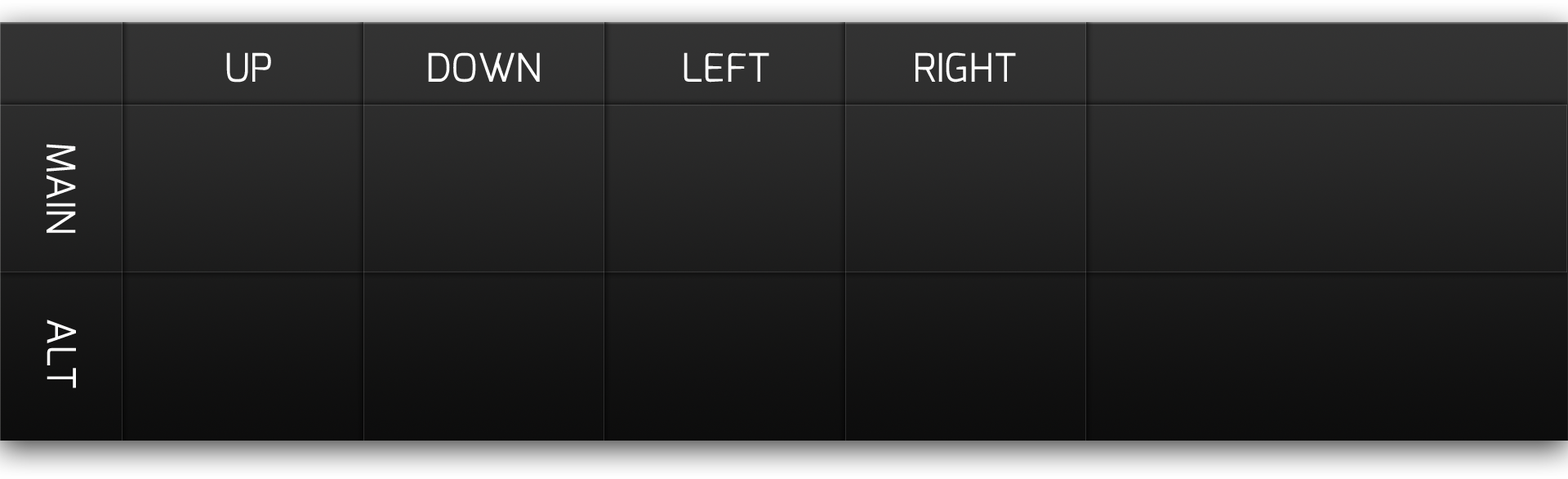
<style>
.page{position:relative;width:1568px;height:479px}
.page>*{position:absolute;margin:0}
.t1{font:39.2px "Exo-Regular";color:#ffffff;text-transform:uppercase}
</style>
<div class="page">
<p class="t1" style="left:226px;top:52px;width:45px;height:30px">Up</p>
<p class="t1" style="left:428px;top:52px;width:112px;height:30px">Down</p>
<p class="t1" style="left:684px;top:52px;width:85px;height:30px">Left</p>
<p class="t1" style="left:915px;top:52px;width:101px;height:30px">Right</p>
<p class="t1" style="left:47px;top:144px;width:29px;height:89px;rotate:90deg">Main</p>
<p class="t1" style="left:47px;top:319px;width:29px;height:69px;rotate:90deg">Alt</p>
</div>
